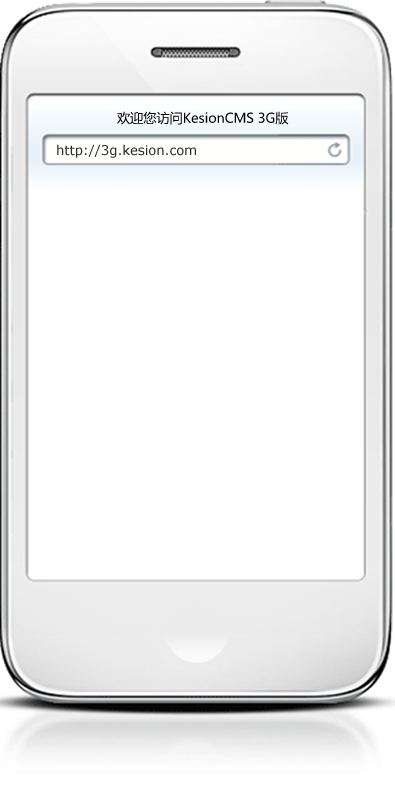
<style>
.page{position:relative;width:395px;height:801px;background:#ffffff}
.page>*{position:absolute;margin:0}
.t1{font:13.1px "MicrosoftYaHei";color:#000000}
.t2{font:13.1px "Verdana";color:#2b2b2b}
</style>
<div class="page">
<p class="t1" style="left:117px;top:111px;width:172px;height:14px">欢迎您访问KesionCMS 3G版</p>
<p class="t2" style="left:57px;top:144px;width:139px;height:14px">http://3g.kesion.com</p>
</div>
